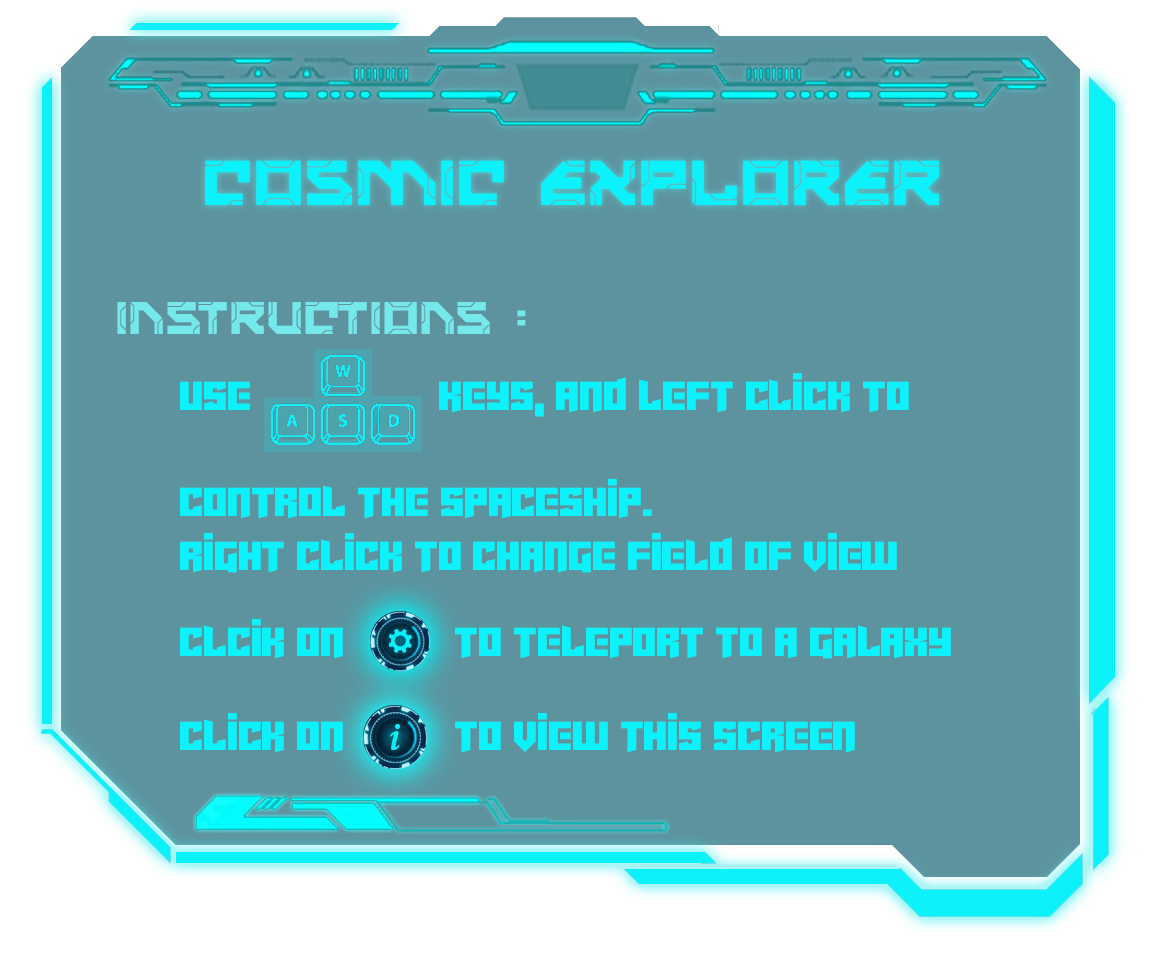
<style>
.page{position:relative;width:1153px;height:963px;background:#5c939f}
.page>*{position:absolute;margin:0}
.t1{font:61.8px "valorax";color:#0df2fa}
.t2{font:44.4px "valorax";color:#75e8ec}
.t3{font:44.4px "Cyberjunkies";color:#0df2fa}
</style>
<div class="page">
<p class="t1" style="left:205px;top:160px;width:734px;height:45px">COSMIC EXPLORER</p>
<p class="t2" style="left:117px;top:302px;width:409px;height:32px">INSTRUCTIONS :</p>
<p class="t3" style="left:180px;top:373px;width:771px;height:380px">USE                 KEYS, AND LEFT CLICK TO<br> <br>CONTROL THE SPACESHIP.<br>RIGHT CLICK TO CHANGE FIELD OF VIEW<br> <br>CLCIK ON          TO TELEPORT TO A GALAXY<br> <br>CLICK ON          TO VIEW THIS SCREEN</p>
</div>
